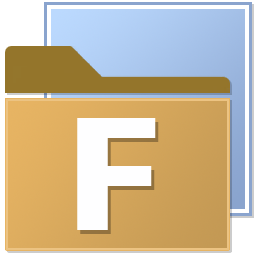
<style>
.page{position:relative;width:256px;height:256px}
.page>*{position:absolute;margin:0}
.t1{font:160px "SegoeUI-Bold";color:#fefeff;scale:1.2 1}
</style>
<div class="page">
<p class="t1" style="left:77px;top:118px;width:79px;height:112px">F</p>
</div>
